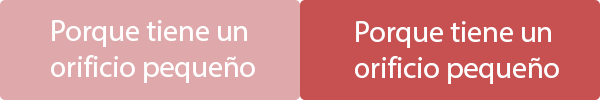
<style>
.page{position:relative;width:600px;height:100px;background:#dfa9ab}
.page>*{position:absolute;margin:0}
.t1{font:30px "MyriadHebrew-Regular";color:#ffffff}
</style>
<div class="page">
<p class="t1" style="left:51px;top:20px;width:204px;height:63px;text-align:center">Porque tiene un <br>orificio pequeño</p>
<p class="t1" style="left:355px;top:21px;width:204px;height:63px;text-align:center">Porque tiene un <br>orificio pequeño</p>
</div>
